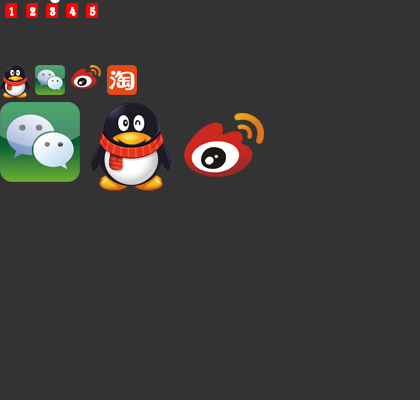
<style>
.page{position:relative;width:420px;height:400px;background:#333333}
.page>*{position:absolute;margin:0}
.t1{font:12px "Algerian";color:#ffffff;font-weight:bold;scale:0.8 1}
</style>
<div class="page">
<p class="t1" style="left:89px;top:6px;width:7px;height:10px">5</p>
<p class="t1" style="left:9px;top:7px;width:5px;height:9px">1</p>
<p class="t1" style="left:30px;top:7px;width:6px;height:9px">2</p>
<p class="t1" style="left:50px;top:7px;width:6px;height:9px">3</p>
<p class="t1" style="left:69px;top:7px;width:7px;height:9px">4</p>
</div>
